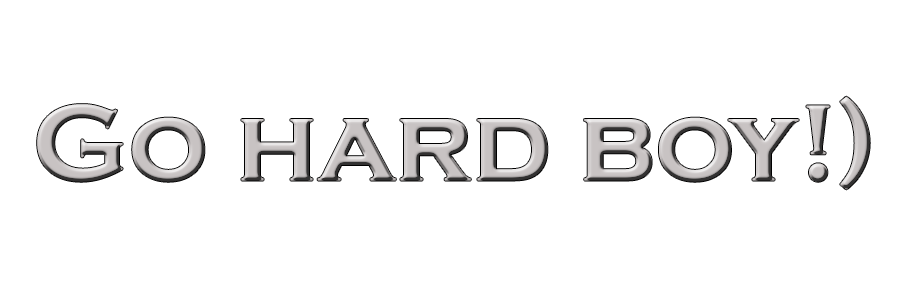
<style>
.page{position:relative;width:900px;height:300px;background:#ffffff}
.page>*{position:absolute;margin:0}
.t1{font:112px "CopperplateGothic-Bold";color:#c8c3c3}
</style>
<div class="page">
<p class="t1" style="left:37px;top:96px;width:833px;height:94px">Go hard boy!)</p>
</div>
